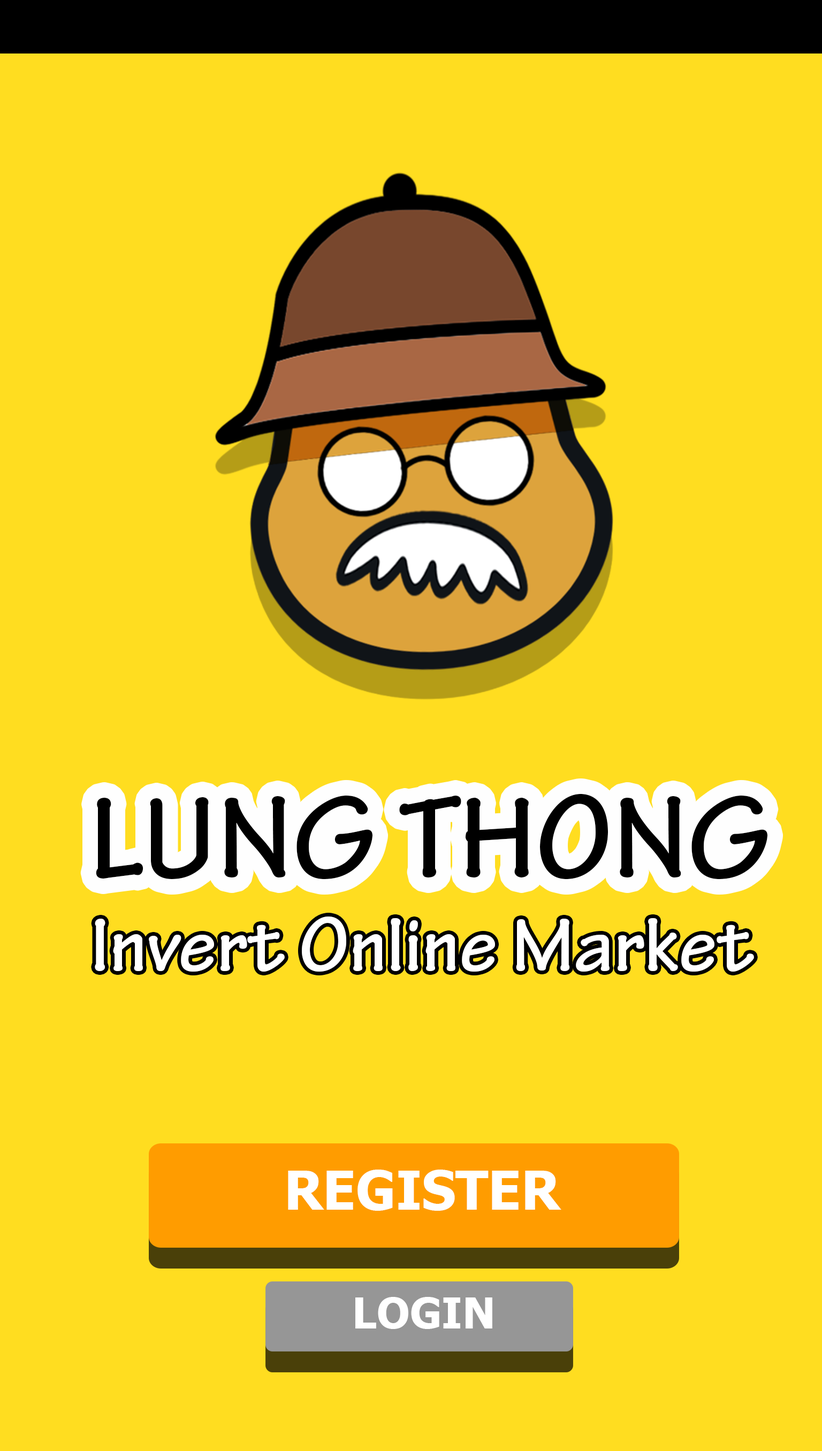
<style>
.page{position:relative;width:822px;height:1451px;background:#ffdd20}
.page>*{position:absolute;margin:0}
.t1{font:123.1px "TektonPro-Bold";color:#000000}
.t2{font:80.3px "TektonPro-Bold";color:#ffffff}
.t3{font:53.5px "Tahoma-Bold";color:#ffffff}
.t4{font:42.8px "Tahoma-Bold";color:#ffffff}
</style>
<div class="page">
<p class="t1" style="left:96px;top:793px;width:671px;height:87px">LUNG THONG</p>
<p class="t2" style="left:95px;top:917px;width:659px;height:55px">Invert Online Market</p>
<p class="t3" style="left:288px;top:1170px;width:273px;height:41px">REGISTER</p>
<p class="t4" style="left:355px;top:1297px;width:137px;height:32px">LOGIN</p>
</div>
